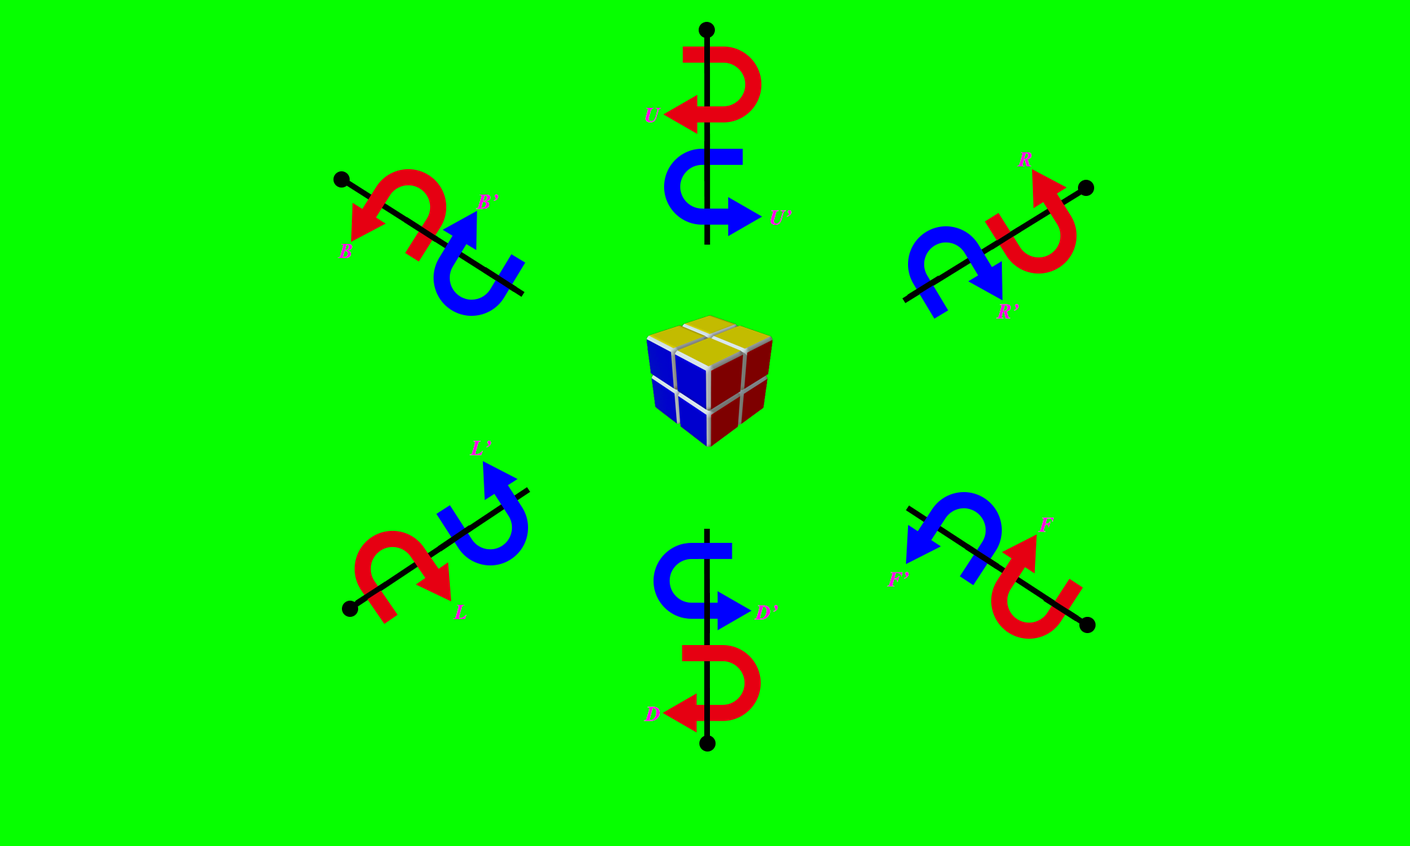
<style>
.page{position:relative;width:1410px;height:846px;background:#06ff00}
.page>*{position:absolute;margin:0}
.t1{font:21.1px "TimesNewRomanPS-BoldItalicMT";color:#ff00ea}
</style>
<div class="page">
<p class="t1" style="left:645px;top:108px;width:16px;height:15px">U</p>
<p class="t1" style="left:1016px;top:152px;width:16px;height:14px">R</p>
<p class="t1" style="left:476px;top:194px;width:22px;height:15px">B’</p>
<p class="t1" style="left:770px;top:210px;width:22px;height:15px">U’</p>
<p class="t1" style="left:338px;top:244px;width:14px;height:14px">B</p>
<p class="t1" style="left:996px;top:304px;width:23px;height:15px">R’</p>
<p class="t1" style="left:469px;top:441px;width:22px;height:14px">L’</p>
<p class="t1" style="left:1038px;top:517px;width:16px;height:15px">F</p>
<p class="t1" style="left:887px;top:572px;width:22px;height:14px">F’</p>
<p class="t1" style="left:453px;top:605px;width:14px;height:14px">L</p>
<p class="t1" style="left:754px;top:605px;width:24px;height:15px">D’</p>
<p class="t1" style="left:644px;top:706px;width:16px;height:15px">D</p>
</div>
